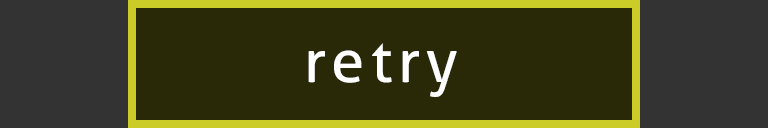
<style>
.page{position:relative;width:768px;height:128px;background:#292908}
.page>*{position:absolute;margin:0}
.t1{font:60px "Aller-Regular";letter-spacing:0.1em;color:#ffffff}
</style>
<div class="page">
<p class="t1" style="left:308px;top:43px;width:149px;height:54px">retry</p>
</div>
